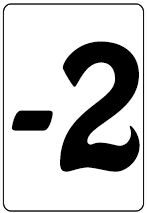
<style>
.page{position:relative;width:147px;height:213px;background:#ffffff}
.page>*{position:absolute;margin:0}
.t1{font:154.6px "HoboStd";color:#000000;scale:1.05 1}
</style>
<div class="page">
<p class="t1" style="left:11px;top:41px;width:129px;height:131px">-2</p>
</div>
